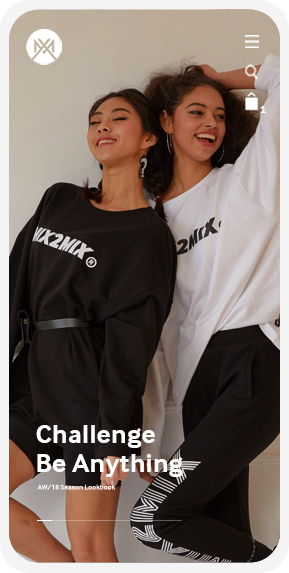
<style>
.page{position:relative;width:289px;height:573px}
.page>*{position:absolute;margin:0}
.t1{font:27.4px/28.1px "InterFace-Bold";color:#ffffff}
.t2{font:7px "InterFace-Bold";color:#ffffff}
</style>
<div class="page">
<p class="t1" style="left:36px;top:425px;width:147px;height:52px">Challenge<br>Be Anything</p>
<p class="t2" style="left:37px;top:484px;width:79px;height:6px">AW/18 Season Lookbook</p>
</div>
